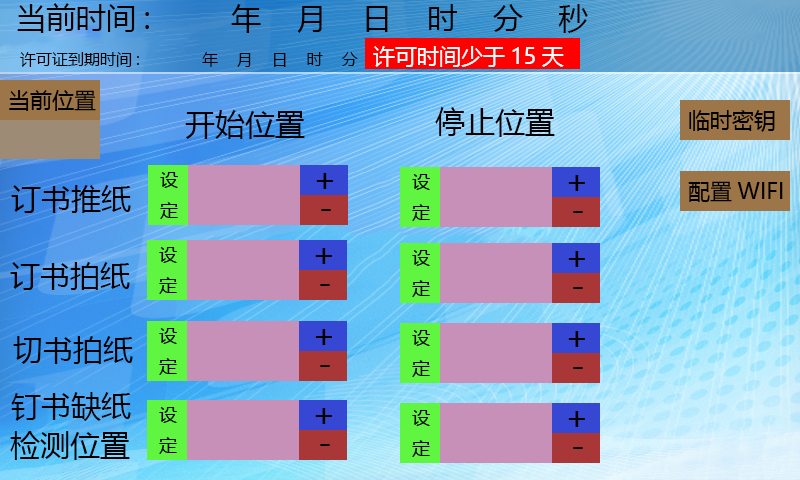
<style>
.page{position:relative;width:800px;height:480px}
.page>*{position:absolute;margin:0}
.t1{font:30px "MicrosoftYaHei";color:#000000}
.t2{font:16px "MicrosoftYaHei";color:#000000}
.t3{font:22px "MicrosoftYaHei";color:#ffffff}
.t4{font:22px "MicrosoftYaHei";color:#000000}
</style>
<div class="page">
<p class="t1" style="left:17px;top:3px;width:571px;height:30px">当前时间:         年    月    日    时    分    秒</p>
<p class="t2" style="left:20px;top:52px;width:338px;height:15px">许可证到期时间:         年    月    日    时    分</p>
<p class="t3" style="left:373px;top:46px;width:191px;height:21px">许可时间少于15天</p>
<p class="t4" style="left:9px;top:90px;width:87px;height:21px">当前位置</p>
<p class="t1" style="left:185px;top:110px;width:120px;height:29px">开始位置</p>
<p class="t1" style="left:435px;top:107px;width:120px;height:30px">停止位置</p>
<p class="t4" style="left:689px;top:110px;width:86px;height:22px">临时密钥</p>
<p class="t1" style="left:11px;top:185px;width:120px;height:28px">订书推纸</p>
<p class="t4" style="left:688px;top:181px;width:95px;height:21px">配置WIFI</p>
<p class="t1" style="left:10px;top:262px;width:120px;height:28px">订书拍纸</p>
<p class="t1" style="left:13px;top:336px;width:120px;height:28px">切书拍纸</p>
<p class="t1" style="left:11px;top:392px;width:120px;height:30px">钉书缺纸</p>
<p class="t1" style="left:10px;top:431px;width:120px;height:29px">检测位置</p>
</div>
